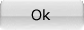
<style>
.page{position:relative;width:84px;height:30px}
.page>*{position:absolute;margin:0}
.t1{font:14px "Verdana";color:#000000}
</style>
<div class="page">
<p class="t1" style="left:31px;top:9px;width:20px;height:12px">Ok</p>
</div>
